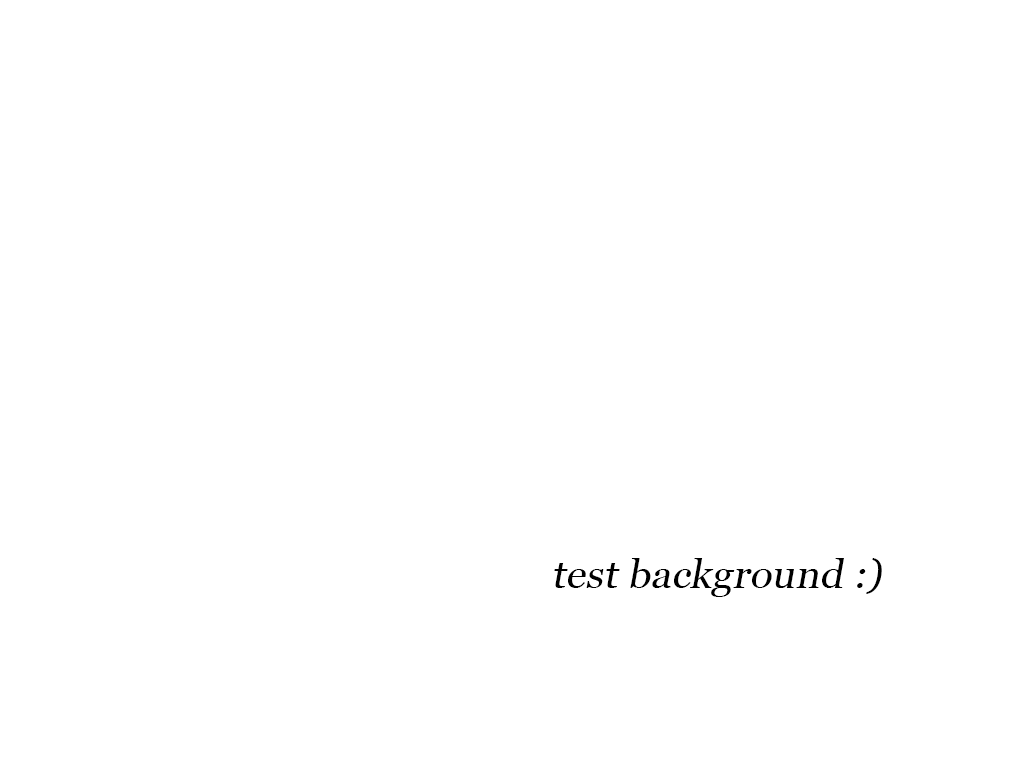
<style>
.page{position:relative;width:1024px;height:768px;background:#ffffff}
.page>*{position:absolute;margin:0}
.t1{font:40px "Georgia";color:#000000;font-style:italic;scale:1.03 1}
</style>
<div class="page">
<p class="t1" style="left:554px;top:558px;width:328px;height:39px">test background :)</p>
</div>
